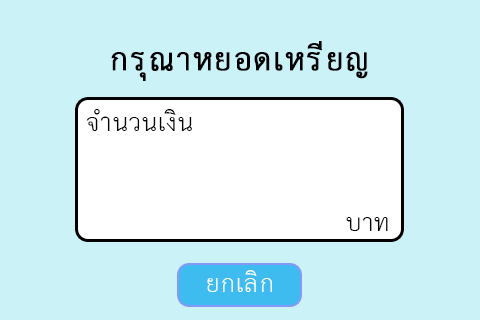
<style>
.page{position:relative;width:480px;height:320px;background:#cbf3f7}
.page>*{position:absolute;margin:0}
.t1{font:44.7px "THSarabunPSK";letter-spacing:0.03em;color:#000000;font-weight:bold}
.t2{font:35.6px "THSarabunPSK";letter-spacing:0.03em;color:#000000}
.t3{font:35.6px "THSarabunPSK";letter-spacing:0.03em;color:#ffffff}
</style>
<div class="page">
<p class="t1" style="left:111px;top:41px;width:257px;height:40px">กรุณาหยอดเหรียญ</p>
<p class="t2" style="left:86px;top:109px;width:106px;height:22px">จำนวนเงิน</p>
<p class="t2" style="left:346px;top:217px;width:42px;height:14px">บาท</p>
<p class="t3" style="left:207px;top:270px;width:65px;height:22px">ยกเลิก</p>
</div>
